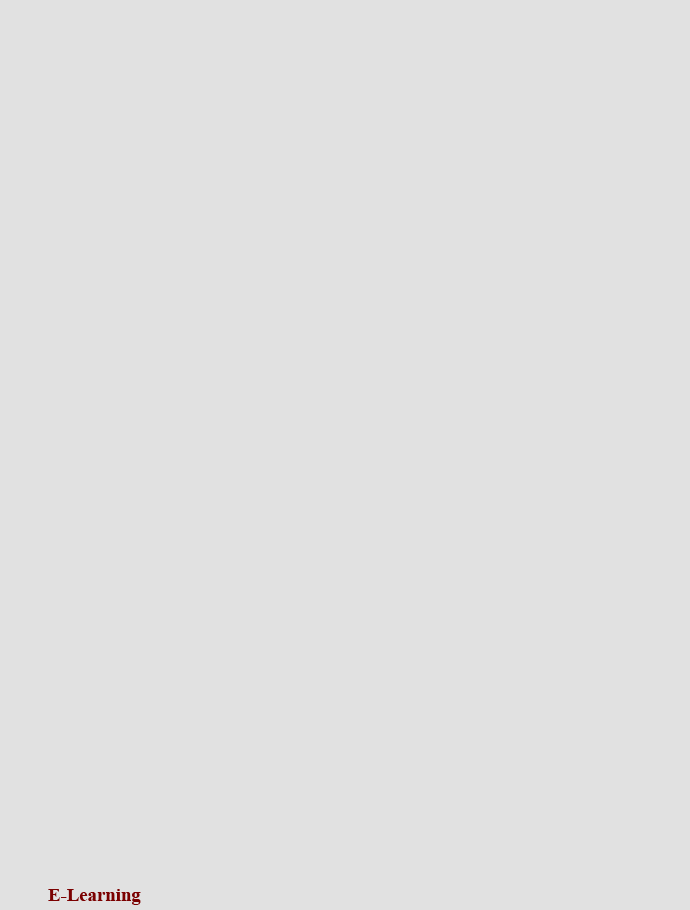
<style>
.page{position:relative;width:690px;height:910px;background:#e1e1e1}
.page>*{position:absolute;margin:0}
.t1{font:18.7px "TimesNewRomanPS-BoldMT";color:#7b0000}
</style>
<div class="page">
<p class="t1" style="left:48px;top:889px;width:93px;height:16px">E-Learning</p>
</div>
